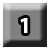
<style>
.page{position:relative;width:50px;height:50px;background:#ffffff}
.page>*{position:absolute;margin:0}
.t1{font:22px "MyriadPro-Bold";color:#ffffff}
</style>
<div class="page">
<p class="t1" style="left:20px;top:18px;width:8px;height:15px">1</p>
</div>
